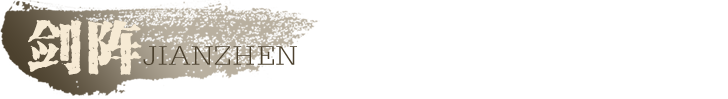
<style>
.page{position:relative;width:728px;height:99px;background:#ffffff}
.page>*{position:absolute;margin:0}
.t1{font:28.5px "FZBYSK--GBK1-0";letter-spacing:0.02em;color:#4c412e}
.t2{font:57.1px "SXSGYS";letter-spacing:0.02em;color:#f6ead4}
</style>
<div class="page">
<p class="t1" style="left:27px;top:19px;width:270px;height:56px"><span class="t2">剑阵</span>JIANZHEN</p>
</div>
